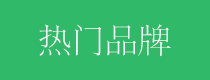
<style>
.page{position:relative;width:210px;height:80px;background:#2fb968}
.page>*{position:absolute;margin:0}
.t1{font:33.3px "FZSYJW--GB1-0";color:#fcfcfc}
</style>
<div class="page">
<p class="t1" style="left:39px;top:24px;width:132px;height:33px">热门品牌</p>
</div>
